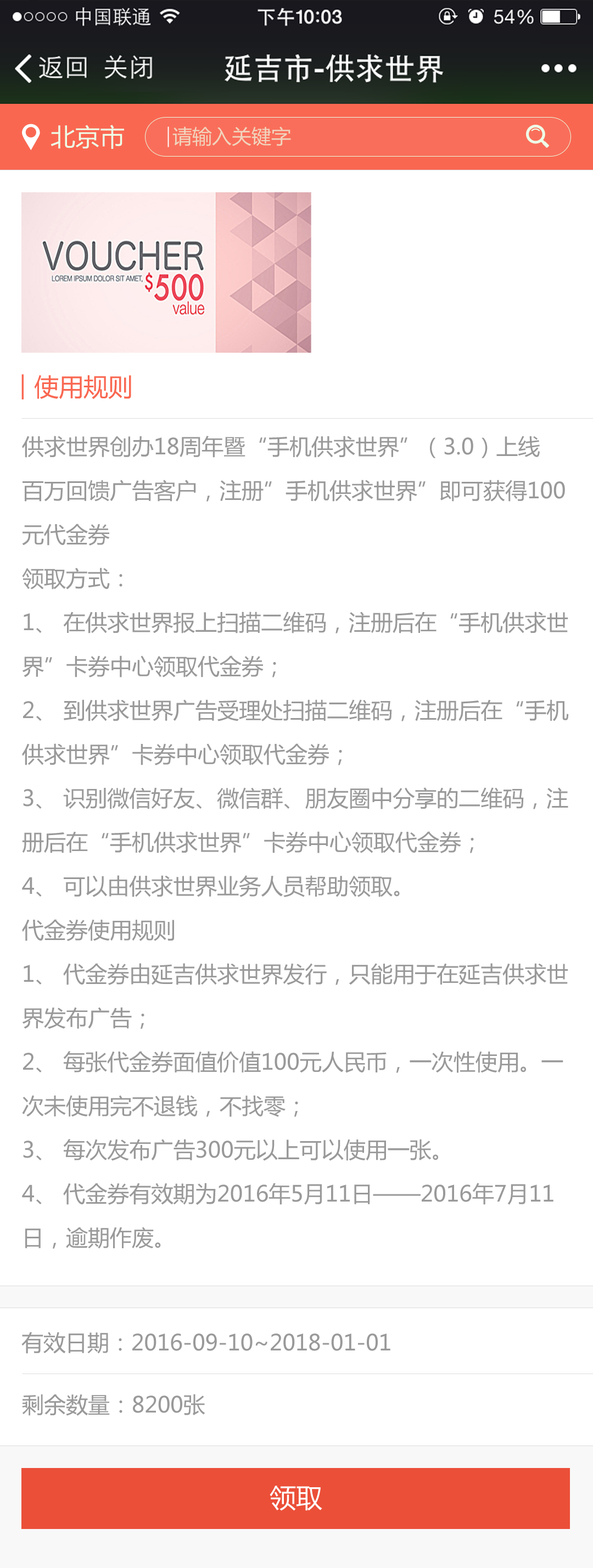
<style>
.page{position:relative;width:593px;height:1568px;background:#ffffff}
.page>*{position:absolute;margin:0}
.t1{font:24.7px "MicrosoftYaHei";color:#eeffe7;text-transform:uppercase}
.t2{font:19.8px "MicrosoftYaHei";color:#f1d4bd;text-transform:uppercase}
.t3{font:24.7px "MicrosoftYaHei";color:#f96751}
.t4{font:22px/44px "MicrosoftYaHei";color:#999999}
.t5{font:22px "MicrosoftYaHei";color:#999999}
.t6{font:26.4px "MicrosoftYaHei";color:#ffffff}
</style>
<div class="page">
<p class="t1" style="left:51px;top:125px;width:73px;height:24px">北京市</p>
<p class="t2" style="left:173px;top:126px;width:118px;height:20px">请输入关键字</p>
<p class="t3" style="left:34px;top:375px;width:97px;height:24px">使用规则</p>
<p class="t4" style="left:22px;top:436px;width:547px;height:813px">供求世界创办18周年暨“手机供求世界”（3.0）上线<br>百万回馈广告客户，注册”手机供求世界”即可获得100元代金券<br>领取方式：<br>1、 在供求世界报上扫描二维码，注册后在“手机供求世界”卡券中心领取代金券；<br>2、 到供求世界广告受理处扫描二维码，注册后在“手机供求世界”卡券中心领取代金券；<br>3、 识别微信好友、微信群、朋友圈中分享的二维码，注册后在“手机供求世界”卡券中心领取代金券；<br>4、 可以由供求世界业务人员帮助领取。<br>代金券使用规则<br>1、 代金券由延吉供求世界发行，只能用于在延吉供求世界发布广告；<br>2、 每张代金券面值价值100元人民币，一次性使用。一次未使用完不退钱，不找零；<br>3、 每次发布广告300元以上可以使用一张。<br>4、 代金券有效期为2016年5月11日——2016年7月11日，逾期作废。</p>
<p class="t5" style="left:21px;top:1332px;width:370px;height:22px">有效日期：2016-09-10~2018-01-01</p>
<p class="t5" style="left:22px;top:1394px;width:183px;height:22px">剩余数量：8200张</p>
<p class="t6" style="left:270px;top:1486px;width:53px;height:25px">领取</p>
</div>
